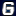
<style>
.page{position:relative;width:16px;height:16px;background:#ffffff}
.page>*{position:absolute;margin:0}
.t1{font:18.7px "Dopenakedfoulphatrelaxed";color:#ffffff}
</style>
<div class="page">
<p class="t1" style="left:2px;top:2px;width:12px;height:13px">G</p>
</div>
